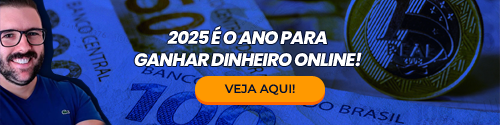
<style>
.page{position:relative;width:500px;height:125px}
.page>*{position:absolute;margin:0}
.t1{font:18px "Poppins-ExtraBoldItalic";letter-spacing:-0.05em;color:#ffffff;text-transform:uppercase}
.t2{font:12px "Montserrat-SemiBold";color:#010e30;text-transform:uppercase}
</style>
<div class="page">
<p class="t1" style="left:134px;top:26px;width:228px;height:41px;text-align:center">2025 é o ano para<br>ganhar dinheiro online!</p>
<p class="t2" style="left:224px;top:84px;width:71px;height:11px">VEJA aqui!</p>
</div>
